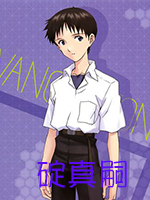
<style>
.page{position:relative;width:150px;height:200px}
.page>*{position:absolute;margin:0}
.t1{font:30px "DFPOP1-W5-WIN-BF";letter-spacing:0.04em;color:#5c0af3}
</style>
<div class="page">
<p class="t1" style="left:37px;top:160px;width:90px;height:28px">碇真嗣</p>
</div>
